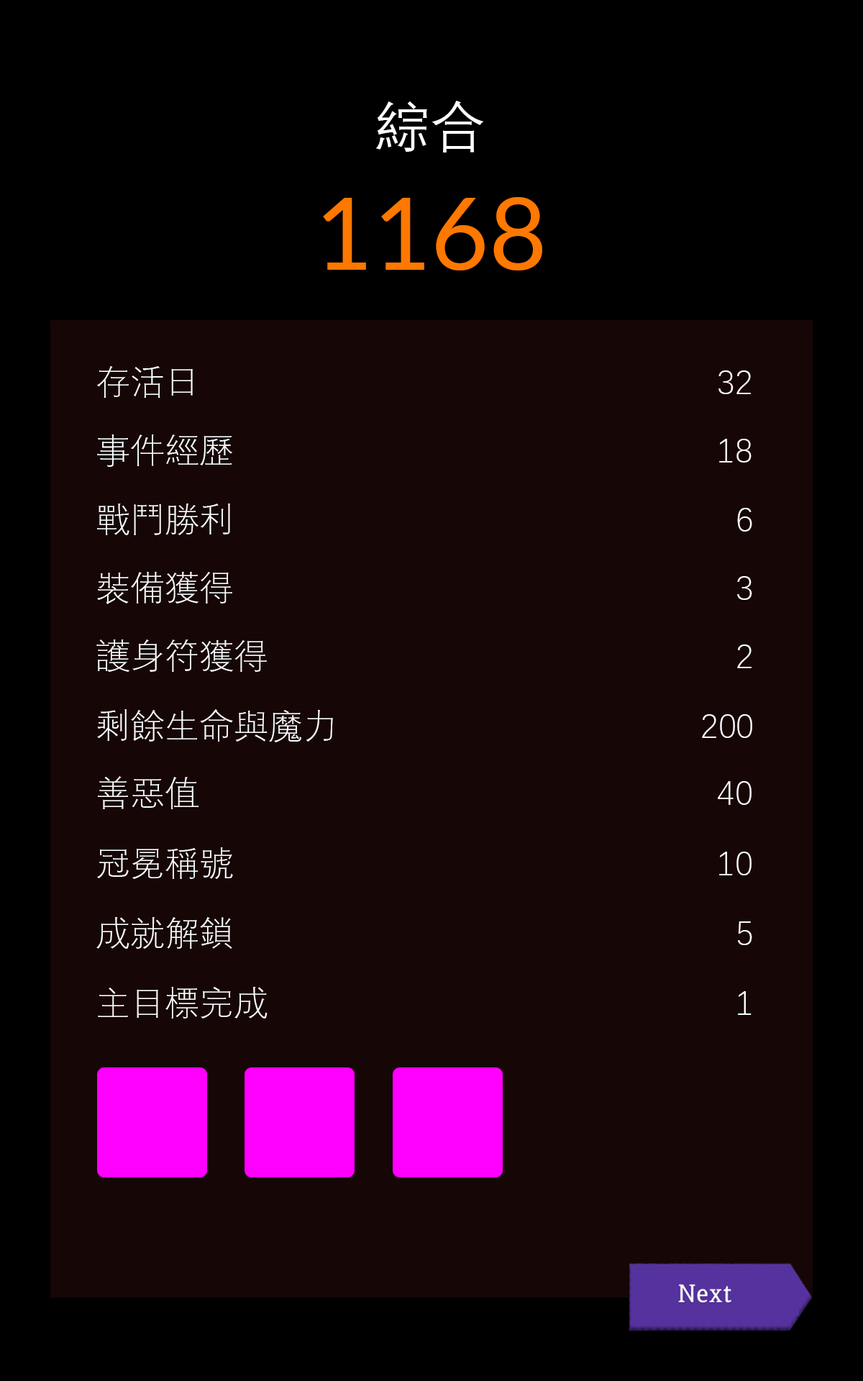
<style>
.page{position:relative;width:863px;height:1381px;background:#160606}
.page>*{position:absolute;margin:0}
.t1{font:55.4px "DengXian-Regular";color:#ffffff}
.t2{font:100.1px "Lato-Regular";color:#ff7800}
.t3{font:34.5px "DengXian-Light";color:#fefefe}
</style>
<div class="page">
<p class="t1" style="left:376px;top:101px;width:107px;height:52px">綜合</p>
<p class="t2" style="left:323px;top:197px;width:219px;height:73px">1168</p>
<p class="t3" style="left:97px;top:366px;width:654px;height:32px">存活日                    32</p>
<p class="t3" style="left:97px;top:435px;width:655px;height:32px">事件經歷                   18</p>
<p class="t3" style="left:97px;top:504px;width:656px;height:31px">戰鬥勝利                      6</p>
<p class="t3" style="left:97px;top:572px;width:656px;height:32px">裝備獲得                     3</p>
<p class="t3" style="left:96px;top:640px;width:656px;height:32px">護身符獲得                    2</p>
<p class="t3" style="left:97px;top:709px;width:656px;height:33px">剩餘生命與魔力               200</p>
<p class="t3" style="left:98px;top:776px;width:654px;height:33px">善惡值                     40</p>
<p class="t3" style="left:97px;top:847px;width:655px;height:32px">冠冕稱號                   10</p>
<p class="t3" style="left:96px;top:917px;width:657px;height:32px">成就解鎖                     5</p>
<p class="t3" style="left:98px;top:987px;width:654px;height:32px">主目標完成                    1</p>
</div>
